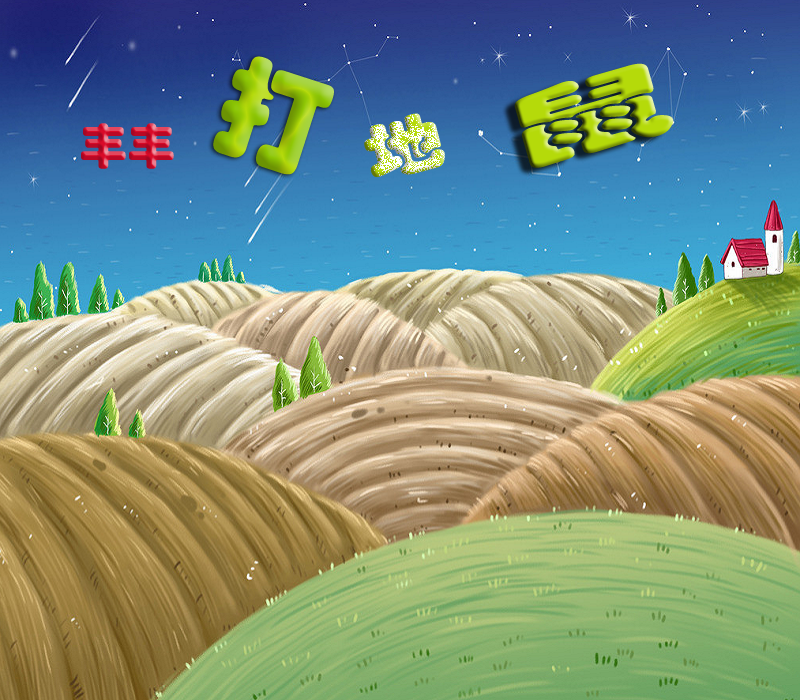
<style>
.page{position:relative;width:800px;height:700px}
.page>*{position:absolute;margin:0}
.t1{font:113.3px "STHupo";scale:0.95 1}
.t2{font:82.2px "STHupo";scale:2.06 1}
.t3{font:61.1px "STHupo";scale:1.3 1}
.t4{font:48px "STHupo"}
</style>
<div class="page">
<p class="t1" style="left:213px;top:56px;width:121px;height:119px;rotate:18deg">打</p>
<p class="t2" style="left:514px;top:63px;width:160px;height:105px;rotate:-16deg">鼠</p>
<p class="t3" style="left:364px;top:113px;width:81px;height:64px;rotate:-15deg">地</p>
<p class="t4" style="left:81px;top:123px;width:93px;height:46px">丰丰</p>
</div>
